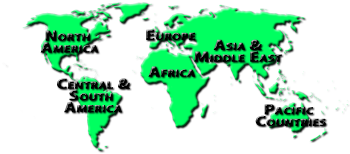
<style>
.page{position:relative;width:350px;height:154px;background:#ffffff}
.page>*{position:absolute;margin:0}
.t1{font:14.7px/11.8px "MyriadPro-Bold";letter-spacing:0.005em;color:#000000;font-variant:small-caps;font-weight:bold;scale:1.2 1}
.t2{font:14.7px "MyriadPro-Bold";letter-spacing:0.005em;font-variant:small-caps;font-weight:bold;scale:1.2 1}
.t3{font:14.7px "MyriadPro-Bold";letter-spacing:0.005em;color:#000000;font-variant:small-caps;font-weight:bold;scale:1.2 1}
</style>
<div class="page">
<p class="t1" style="left:40px;top:30px;width:59px;height:23px;text-align:center">North <br>America</p>
<p class="t2" style="left:146px;top:29px;width:50px;height:11px">Europe</p>
<p class="t1" style="left:194px;top:39px;width:88px;height:23px;text-align:center">Asia &amp;<br>Middle East</p>
<p class="t1" style="left:57px;top:78px;width:73px;height:35px;text-align:center">Central &amp;<br>South <br>America</p>
<p class="t3" style="left:148px;top:66px;width:47px;height:11px">Africa</p>
<p class="t1" style="left:255px;top:104px;width:71px;height:22px;text-align:center">Pacific <br>Countries</p>
</div>
